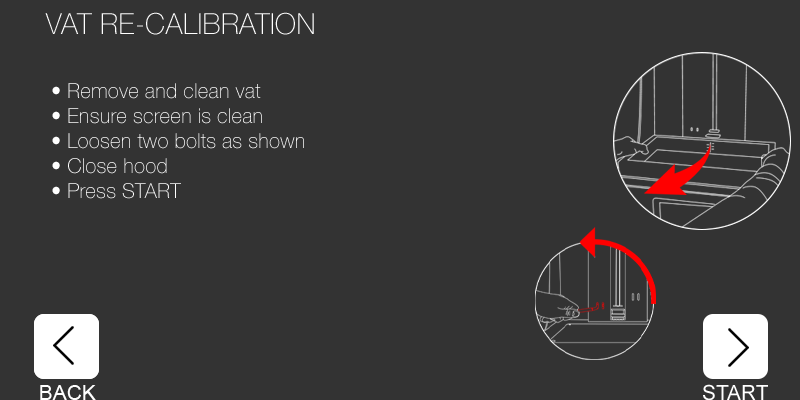
<style>
.page{position:relative;width:800px;height:400px;background:#333333}
.page>*{position:absolute;margin:0}
.t1{font:20.8px "HelveticaNeue-Thin";color:#ffffff}
</style>
<div class="page">
<p class="t1" style="left:52px;top:83px;width:252px;height:116px">• Remove and clean vat<br>• Ensure screen is clean<br>• Loosen two bolts as shown<br>• Close hood<br>• Press START</p>
</div>
